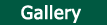
<style>
.page{position:relative;width:107px;height:25px;background:#005941}
.page>*{position:absolute;margin:0}
.t1{font:18px "Tahoma";letter-spacing:0.02em;color:#ffffff;font-weight:bold}
</style>
<div class="page">
<p class="t1" style="left:21px;top:5px;width:60px;height:18px">Gallery</p>
</div>
